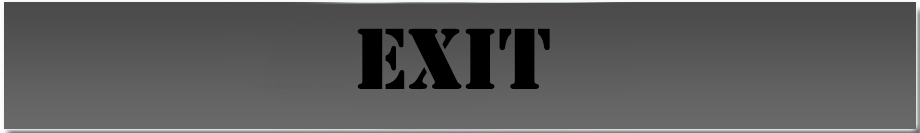
<style>
.page{position:relative;width:920px;height:133px}
.page>*{position:absolute;margin:0}
.t1{font:80px "StencilStd";color:#000000}
</style>
<div class="page">
<p class="t1" style="left:357px;top:28px;width:193px;height:61px">eXIT</p>
</div>
